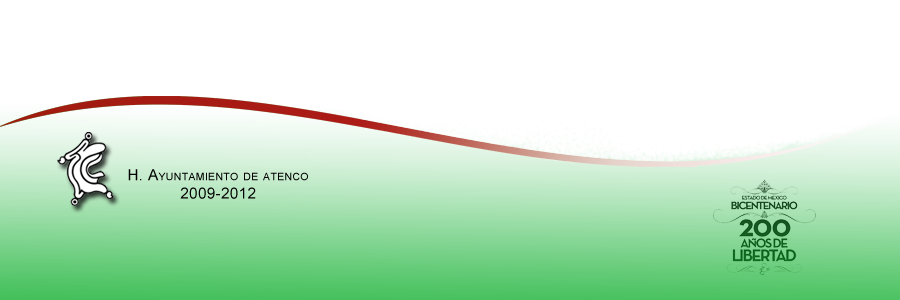
<style>
.page{position:relative;width:900px;height:300px;background:#ffffff}
.page>*{position:absolute;margin:0}
.t1{font:15.2px "ArialMT";letter-spacing:0.025em;color:#000000;font-variant:small-caps}
</style>
<div class="page">
<p class="t1" style="left:128px;top:169px;width:180px;height:30px;text-align:center">H. Ayuntamiento de atenco<br>2009-2012</p>
</div>
